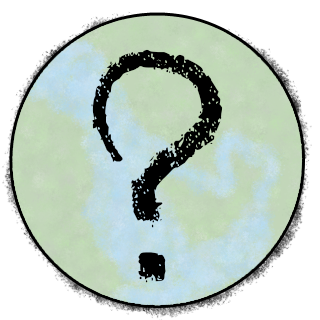
<style>
.page{position:relative;width:320px;height:320px;background:#ffffff}
.page>*{position:absolute;margin:0}
.t1{font:352.4px "DKCrayonCrumble";color:#000000}
</style>
<div class="page">
<p class="t1" style="left:91px;top:49px;width:132px;height:234px">?</p>
</div>
